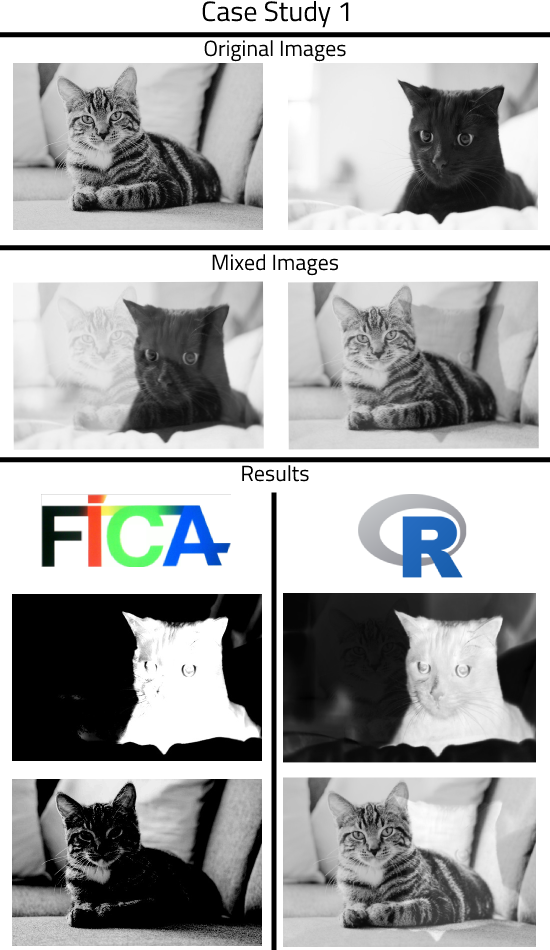
<style>
.page{position:relative;width:550px;height:950px;background:#ffffff}
.page>*{position:absolute;margin:0}
.t1{font:28px "Cairo-Regular";color:#000000}
.t2{font:22px "Cairo-Regular";color:#000000}
</style>
<div class="page">
<p class="t1" style="left:202px;top:0px;width:147px;height:28px">Case Study 1</p>
<p class="t2" style="left:204px;top:40px;width:142px;height:22px">Original Images</p>
<p class="t2" style="left:212px;top:254px;width:127px;height:22px">Mixed Images</p>
<p class="t2" style="left:242px;top:465px;width:67px;height:17px">Results</p>
</div>
